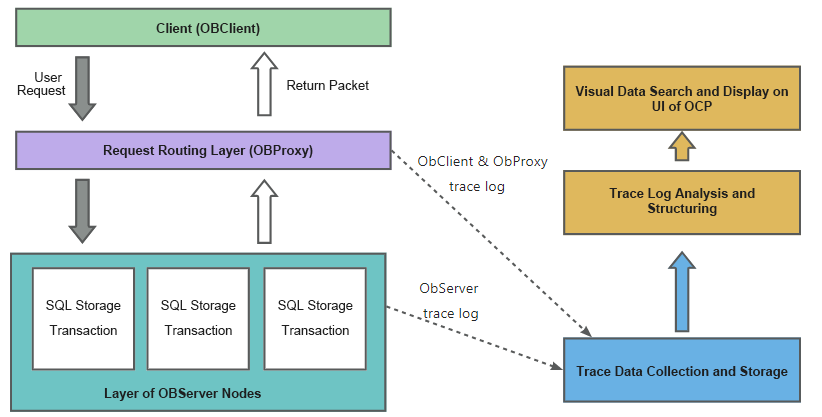
<style>
.page{position:relative;width:822px;height:417px;background:#ffffff}
.page>*{position:absolute;margin:0}
.t1{font:13px "Arial-BoldMT";color:#1f1f1f}
.t2{font:13px/13px "ArialMT";color:#1f1f1f}
.t3{font:13px "ArialMT";color:#1f1f1f}
.t4{font:13px/15px "Arial-BoldMT";color:#1f1f1f}
.t5{font:13px/25px "ArialMT";color:#1f1f1f}
</style>
<div class="page">
<p class="t1" style="left:156px;top:23px;width:104px;height:13px">Client (OBClient)</p>
<p class="t2" style="left:17px;top:72px;width:49px;height:26px;text-align:right">User <br>Request</p>
<p class="t3" style="left:287px;top:80px;width:82px;height:10px">Return Packet</p>
<p class="t4" style="left:575px;top:86px;width:213px;height:25px;text-align:center">Visual Data Search and Display on UI of OCP</p>
<p class="t1" style="left:103px;top:145px;width:210px;height:13px">Request Routing Layer (OBProxy)</p>
<p class="t4" style="left:609px;top:188px;width:146px;height:28px;text-align:center">Trace Log Analysis and Structuring</p>
<p class="t5" style="left:46px;top:300px;width:75px;height:35px;text-align:center">SQL Storage Transaction</p>
<p class="t5" style="left:161px;top:300px;width:75px;height:35px;text-align:center">SQL Storage Transaction</p>
<p class="t5" style="left:278px;top:300px;width:75px;height:35px;text-align:center">SQL Storage Transaction</p>
<p class="t1" style="left:576px;top:366px;width:212px;height:13px">Trace Data Collection and Storage</p>
<p class="t1" style="left:104px;top:388px;width:157px;height:13px">Layer of OBServer Nodes</p>
</div>
